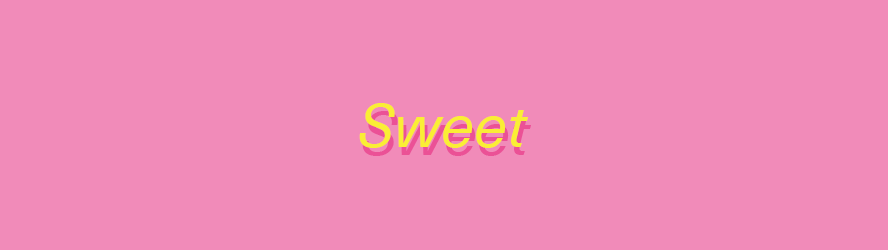
<style>
.page{position:relative;width:888px;height:250px;background:#f18bb9}
.page>*{position:absolute;margin:0}
.t1{font:60px "NeueHaasUnicaPro-Italic";color:#faee35}
</style>
<div class="page">
<p class="t1" style="left:359px;top:103px;width:169px;height:45px">Sweet</p>
</div>
